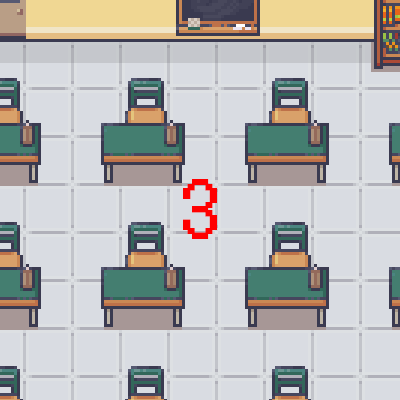
<style>
.page{position:relative;width:400px;height:400px;background:#d9dce2}
.page>*{position:absolute;margin:0}
.t1{font:72px "DotGothic16-Regular";color:#ff0000;font-weight:bold}
</style>
<div class="page">
<p class="t1" style="left:183px;top:179px;width:34px;height:60px">3</p>
</div>
